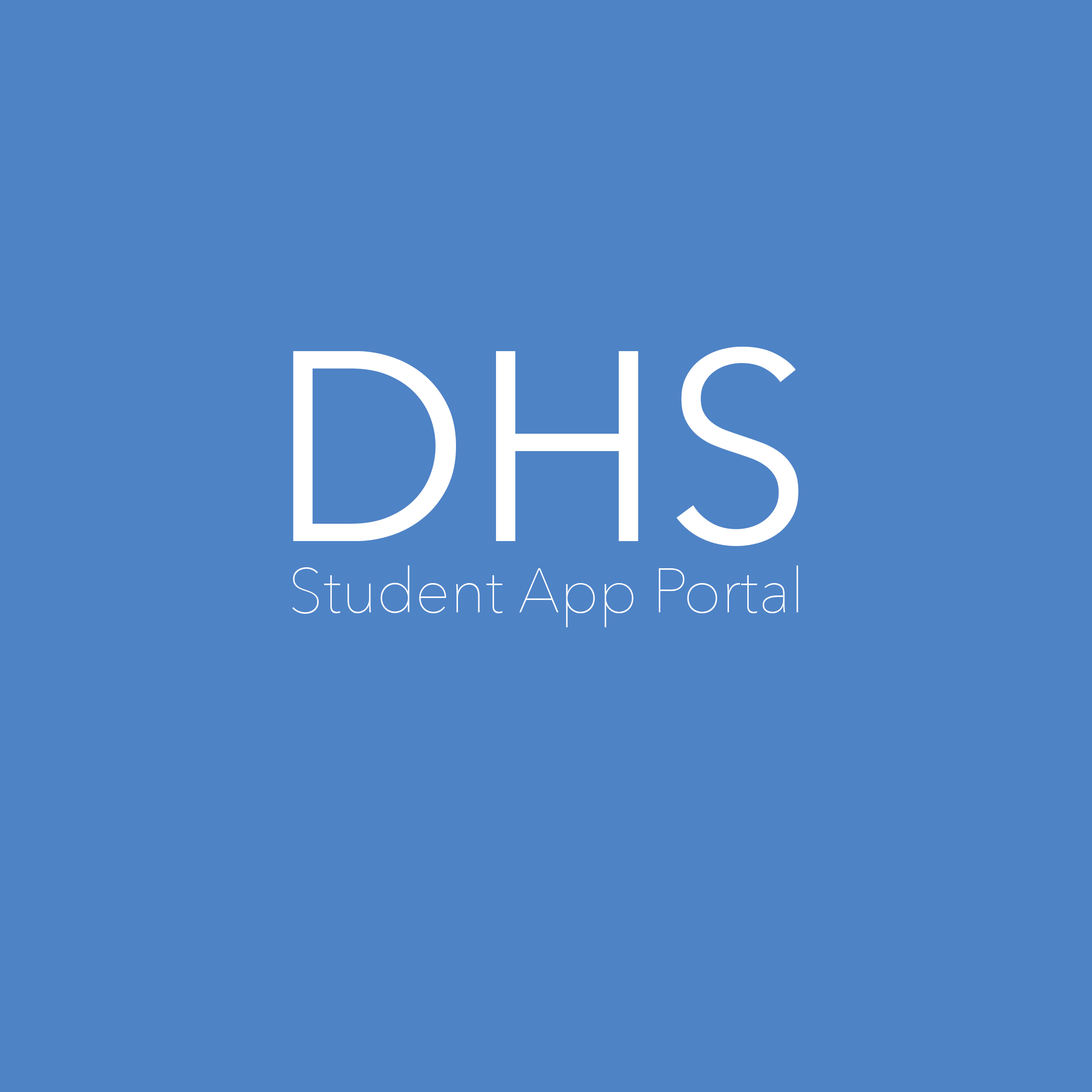
<style>
.page{position:relative;width:1092px;height:1092px;background:#4e83c6}
.page>*{position:absolute;margin:0}
.t1{font:267.9px "AvenirNext-Regular";color:#ffffff}
.t2{font:61.8px "AvenirNext-UltraLight";color:#ffffff}
</style>
<div class="page">
<p class="t1" style="left:293px;top:347px;width:506px;height:199px">DHS</p>
<p class="t2" style="left:292px;top:565px;width:506px;height:63px">Student App Portal</p>
</div>
